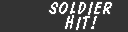
<style>
.page{position:relative;width:128px;height:32px;background:#333333}
.page>*{position:absolute;margin:0}
.t1{font:18px/15px "DomDiagonalBT-Regular";letter-spacing:0.075em;color:#ffffff}
</style>
<div class="page">
<p class="t1" style="left:49px;top:2px;width:63px;height:28px;text-align:center">SOLDIER<br>HIT!</p>
</div>
